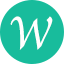
<style>
.page{position:relative;width:64px;height:64px;background:#18bc9c}
.page>*{position:absolute;margin:0}
.t1{font:48px "Apple-Chancery";letter-spacing:-0.04em;color:#ffffff}
</style>
<div class="page">
<p class="t1" style="left:10px;top:16px;width:43px;height:34px">W</p>
</div>
